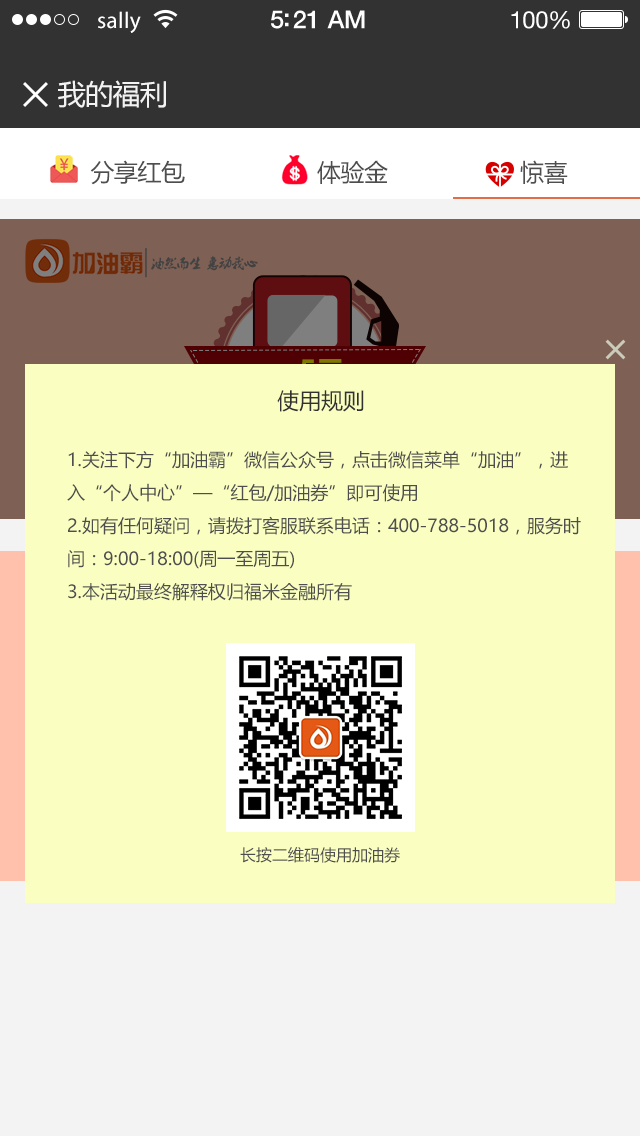
<style>
.page{position:relative;width:640px;height:1136px;background:#faffc1}
.page>*{position:absolute;margin:0}
.t1{font:23px "MyriadPro-Regular";letter-spacing:0.02em;color:#ffffff}
.t2{font:25px "HelveticaNeue-Medium";letter-spacing:-0.02em;color:#ffffff}
.t3{font:24px "HelveticaNeue";letter-spacing:-0.02em;color:#ffffff}
.t4{font:28px "MicrosoftYaHei";letter-spacing:-0.02em;color:#f3f3f3}
.t5{font:24px "MicrosoftYaHei";letter-spacing:-0.02em;color:#4e4e4e}
.t6{font:22px "MicrosoftYaHei";color:#323232}
.t7{font:18px/33px "MicrosoftYaHei";color:#4e4e4e}
.t8{font:16px "MicrosoftYaHei";color:#4e4e4e}
</style>
<div class="page">
<p class="t1" style="left:98px;top:11px;width:43px;height:22px">sally</p>
<p class="t2" style="left:271px;top:10px;width:94px;height:19px">5:21 AM</p>
<p class="t3" style="left:511px;top:11px;width:59px;height:18px">100%</p>
<p class="t4" style="left:58px;top:80px;width:108px;height:28px">我的福利</p>
<p class="t5" style="left:90px;top:160px;width:478px;height:25px">分享红包                    体验金                    惊喜</p>
<p class="t6" style="left:277px;top:390px;width:87px;height:22px">使用规则</p>
<p class="t7" style="left:67px;top:451px;width:514px;height:150px">1.关注下方“加油霸”微信公众号，点击微信菜单“加油”，进入“个人中心”—“红包/加油券”即可使用<br>2.如有任何疑问，请拨打客服联系电话：400-788-5018，服务时间：9:00-18:00(周一至周五)<br>3.本活动最终解释权归福米金融所有</p>
<p class="t8" style="left:240px;top:847px;width:160px;height:16px">长按二维码使用加油券</p>
</div>
